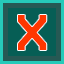
<style>
.page{position:relative;width:64px;height:64px;background:#065e55}
.page>*{position:absolute;margin:0}
.t1{font:48px "VoyagerGrotesqueBold";color:#ff3600}
</style>
<div class="page">
<p class="t1" style="left:18px;top:15px;width:29px;height:35px">X</p>
</div>
